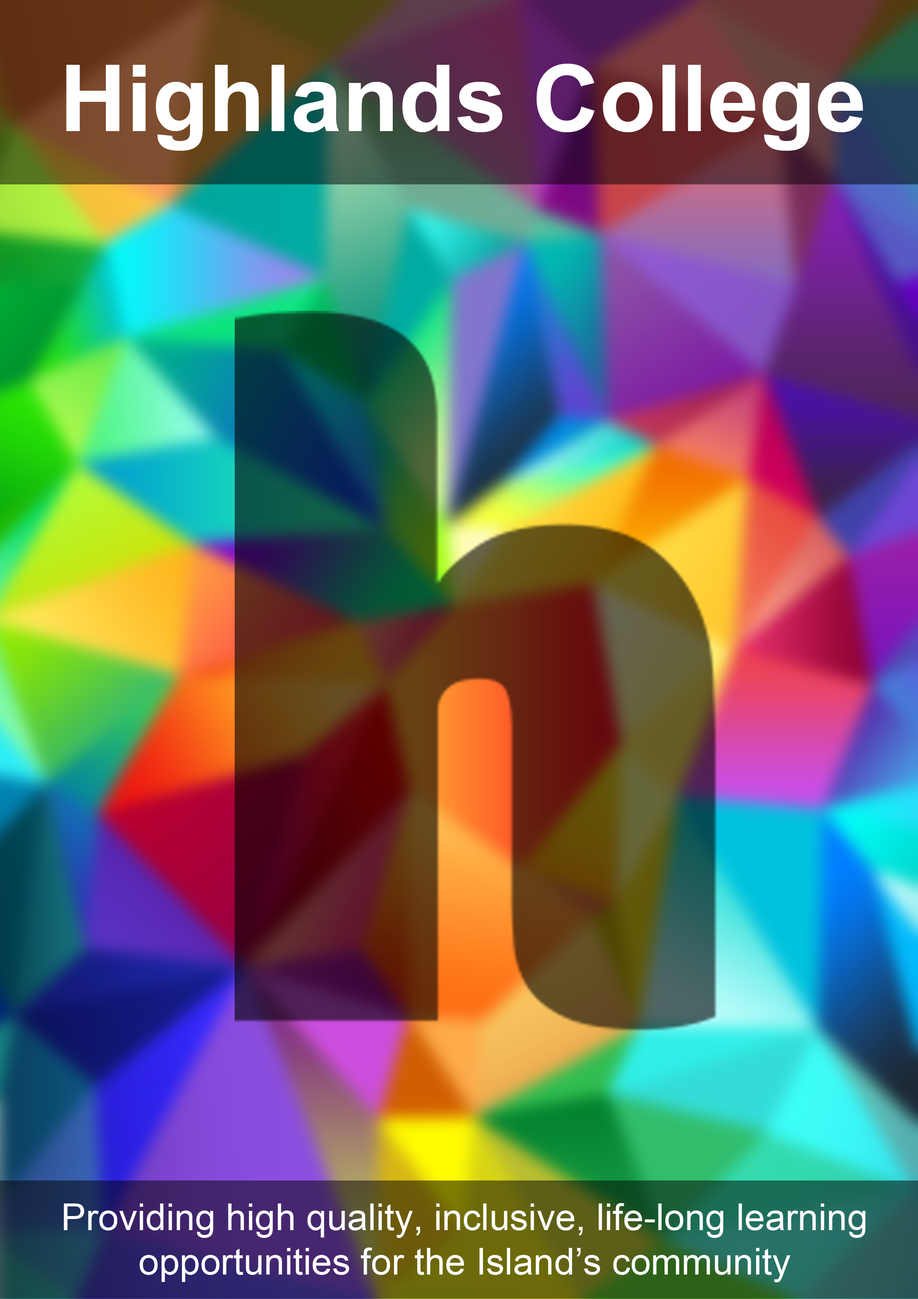
<style>
.page{position:relative;width:918px;height:1299px}
.page>*{position:absolute;margin:0}
.t1{font:92.6px "Arial-BoldMT";color:#ffffff}
.t2{font:37px "ArialMT";color:#ffffff}
</style>
<div class="page">
<p class="t1" style="left:66px;top:64px;width:797px;height:87px">Highlands College</p>
<p class="t2" style="left:64px;top:1203px;width:802px;height:79px;text-align:center">Providing high quality, inclusive, life-long learning<br>opportunities for the Island’s community</p>
</div>
